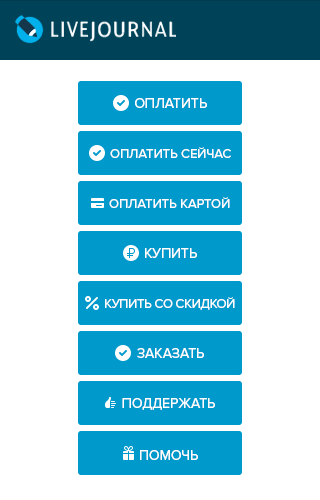
<style>
.page{position:relative;width:320px;height:500px;background:#ffffff}
.page>*{position:absolute;margin:0}
.t1{font:14px "ProximaNova-Regular";color:#ffffff;text-transform:uppercase}
.t2{font:13px "ProximaNova-Regular";color:#ffffff;text-transform:uppercase}
.t3{font:13px "ProximaNova-Regular";letter-spacing:-0.025em;color:#ffffff;text-transform:uppercase}
</style>
<div class="page">
<p class="t1" style="left:135px;top:98px;width:72px;height:10px">Оплатить</p>
<p class="t2" style="left:110px;top:147px;width:121px;height:11px">Оплатить сейчас</p>
<p class="t2" style="left:109px;top:197px;width:121px;height:11px">Оплатить картой</p>
<p class="t1" style="left:145px;top:248px;width:52px;height:10px">Купить</p>
<p class="t3" style="left:105px;top:297px;width:130px;height:13px">Купить со скидкой</p>
<p class="t1" style="left:137px;top:348px;width:67px;height:10px">Заказать</p>
<p class="t1" style="left:122px;top:398px;width:93px;height:12px">Поддержать</p>
<p class="t1" style="left:140px;top:450px;width:58px;height:10px">Помочь</p>
</div>
